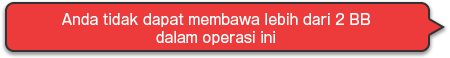
<style>
.page{position:relative;width:450px;height:58px;background:#ed3b3b}
.page>*{position:absolute;margin:0}
.t1{font:14px/18px "GothicMB101Pro-Regular";color:#ffffff}
</style>
<div class="page">
<p class="t1" style="left:62px;top:13px;width:308px;height:32px;text-align:center">Anda tidak dapat membawa lebih dari 2 BB<br>dalam operasi ini</p>
</div>
